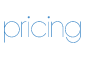
<style>
.page{position:relative;width:85px;height:60px;background:#ffffff}
.page>*{position:absolute;margin:0}
.t1{font:20.8px "BondoluoPeek";color:#438bc9}
</style>
<div class="page">
<p class="t1" style="left:4px;top:16px;width:77px;height:27px">Pricing</p>
</div>
